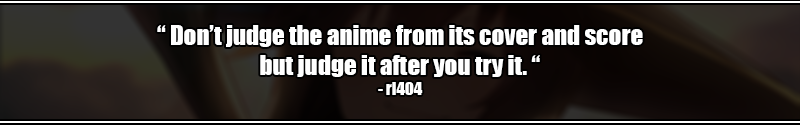
<style>
.page{position:relative;width:800px;height:125px}
.page>*{position:absolute;margin:0}
.t1{font:25px "Impact";color:#ffffff}
.t2{font:16.7px "Impact";color:#ffffff}
</style>
<div class="page">
<p class="t1" style="left:157px;top:25px;width:486px;height:70px;text-align:center">“ Don’t judge the anime from its cover and score<br>but judge it after you try it. “<br><span class="t2">- rl404</span></p>
</div>
